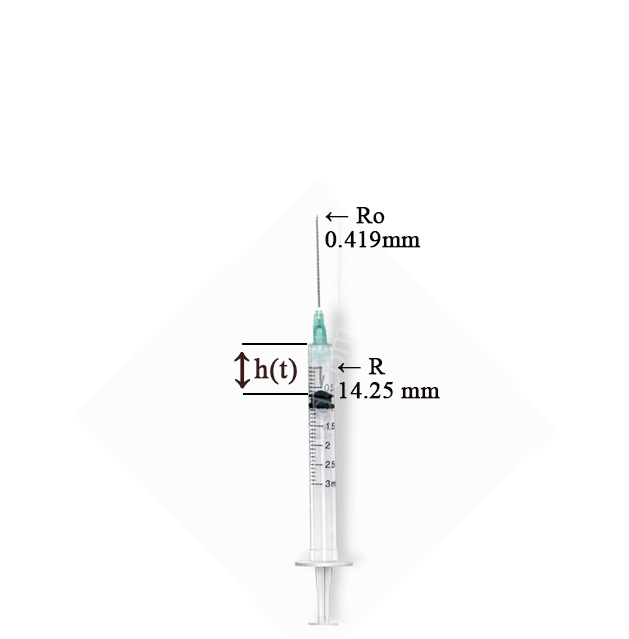
<style>
.page{position:relative;width:629px;height:639px;background:#ffffff}
.page>*{position:absolute;margin:0}
.t1{font:24px/24px "TimesNewRomanPSMT";color:#0d0505;font-weight:bold}
.t2{font:40px "TimesNewRomanPSMT";color:#391b1b;font-weight:bold}
.t3{font:28.5px "TimesNewRomanPSMT";color:#391b1b;font-weight:bold}
.t4{font:24px/24px "TimesNewRomanPSMT";color:#100505;font-weight:bold}
</style>
<div class="page">
<p class="t1" style="left:325px;top:207px;width:96px;height:41px">← Ro<br>0.419mm</p>
<p class="t2" style="left:234px;top:352px;width:16px;height:36px;rotate:180deg">↓</p>
<p class="t2" style="left:235px;top:353px;width:16px;height:36px">↓</p>
<p class="t3" style="left:254px;top:358px;width:43px;height:27px">h(t)</p>
<p class="t4" style="left:338px;top:358px;width:102px;height:41px">← R<br>14.25 mm</p>
</div>
